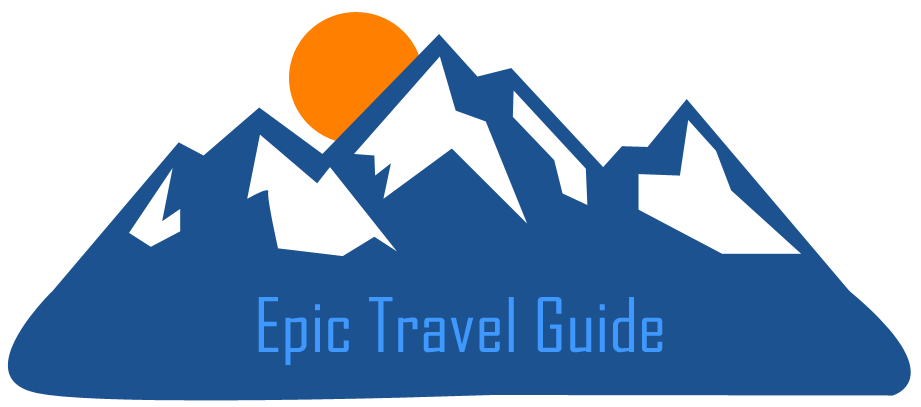
<style>
.page{position:relative;width:921px;height:407px;background:#ffffff}
.page>*{position:absolute;margin:0}
.t1{font:72px "AgencyFB-Reg";color:#3f98fd;scale:1.07 1}
</style>
<div class="page">
<p class="t1" style="left:258px;top:297px;width:405px;height:68px">Epic Travel Guide</p>
</div>
